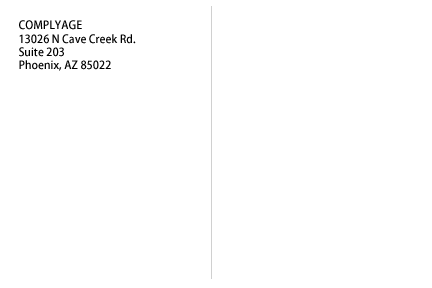
<style>
.page{position:relative;width:432px;height:288px;background:#ffffff}
.page>*{position:absolute;margin:0}
.t1{font:11px "KozGoPr6N-Medium";color:#000000}
</style>
<div class="page">
<p class="t1" style="left:19px;top:20px;width:117px;height:51px">COMPLYAGE<br>13026 N Cave Creek Rd. <br>Suite 203<br>Phoenix, AZ 85022</p>
</div>
